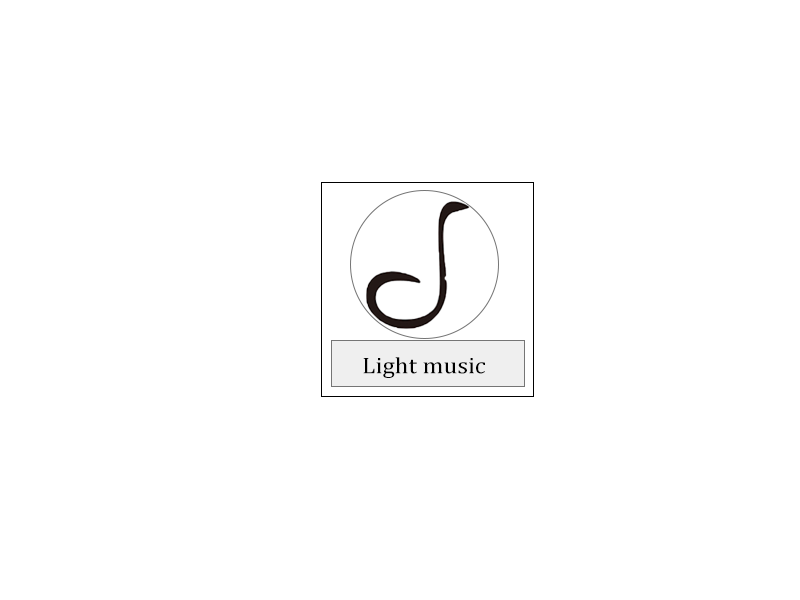
<style>
.page{position:relative;width:800px;height:600px;background:#ffffff}
.page>*{position:absolute;margin:0}
.t1{font:23px "CambriaMath";color:#000000;scale:1.09 1}
</style>
<div class="page">
<p class="t1" style="left:363px;top:357px;width:122px;height:21px">Light music</p>
</div>
